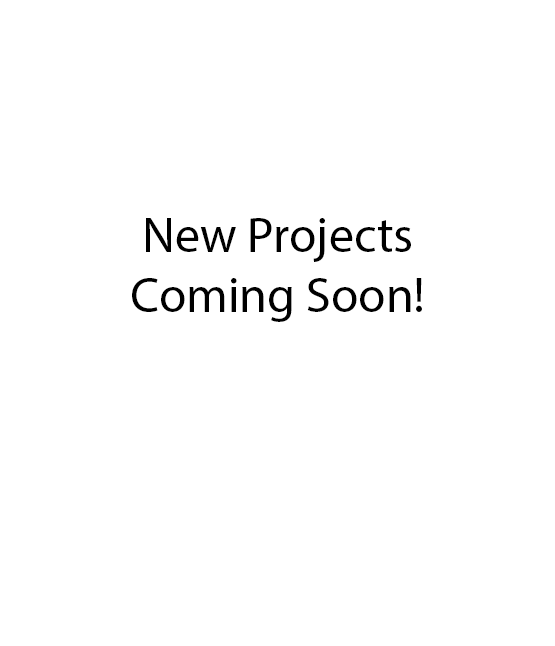
<style>
.page{position:relative;width:555px;height:646px;background:#ffffff}
.page>*{position:absolute;margin:0}
.t1{font:50px "MyriadPro-Regular";color:#000000}
</style>
<div class="page">
<p class="t1" style="left:132px;top:218px;width:290px;height:104px;text-align:center">New Projects <br>Coming Soon!</p>
</div>
